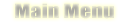
<style>
.page{position:relative;width:128px;height:24px;background:#ffffff}
.page>*{position:absolute;margin:0}
.t1{font:18px "Impact";color:#c4c3b7;scale:1.25 1}
</style>
<div class="page">
<p class="t1" style="left:15px;top:3px;width:99px;height:16px">Main Menu</p>
</div>
